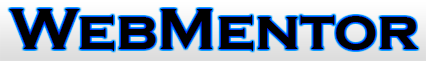
<style>
.page{position:relative;width:426px;height:61px;background:#000000}
.page>*{position:absolute;margin:0}
.t1{font:59.5px "CopperplateGothic-Bold";color:#000000}
</style>
<div class="page">
<p class="t1" style="left:9px;top:9px;width:409px;height:42px">WebMentor</p>
</div>
